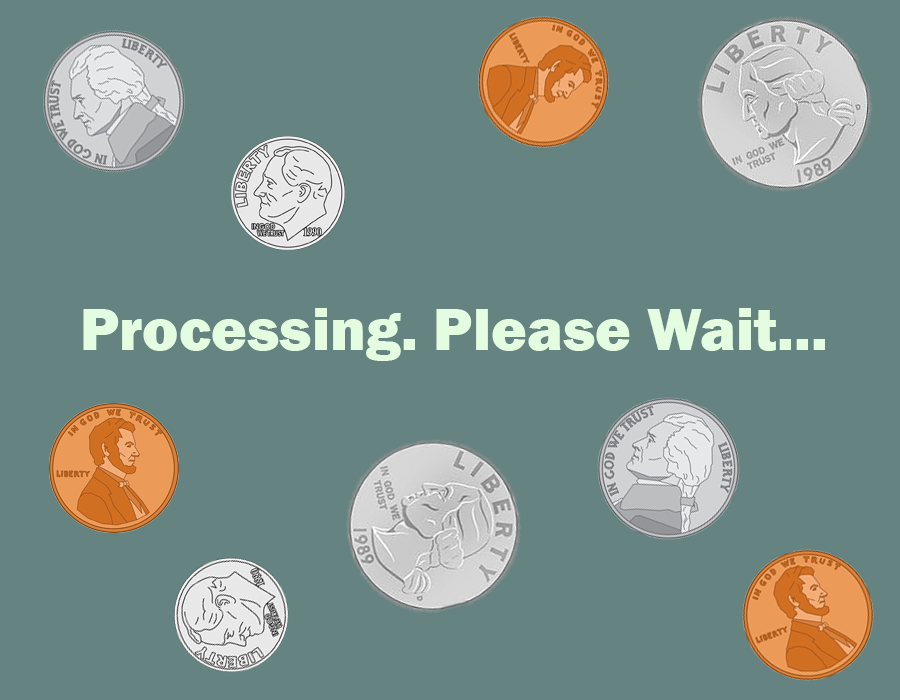
<style>
.page{position:relative;width:900px;height:700px;background:#648381}
.page>*{position:absolute;margin:0}
.t1{font:14.7px "FranklinGothic-Heavy";color:#e4fde1}
</style>
<div class="page">
<p class="t1" style="left:83px;top:308px;width:742px;height:53px">Processing. Please Wait...</p>
</div>
